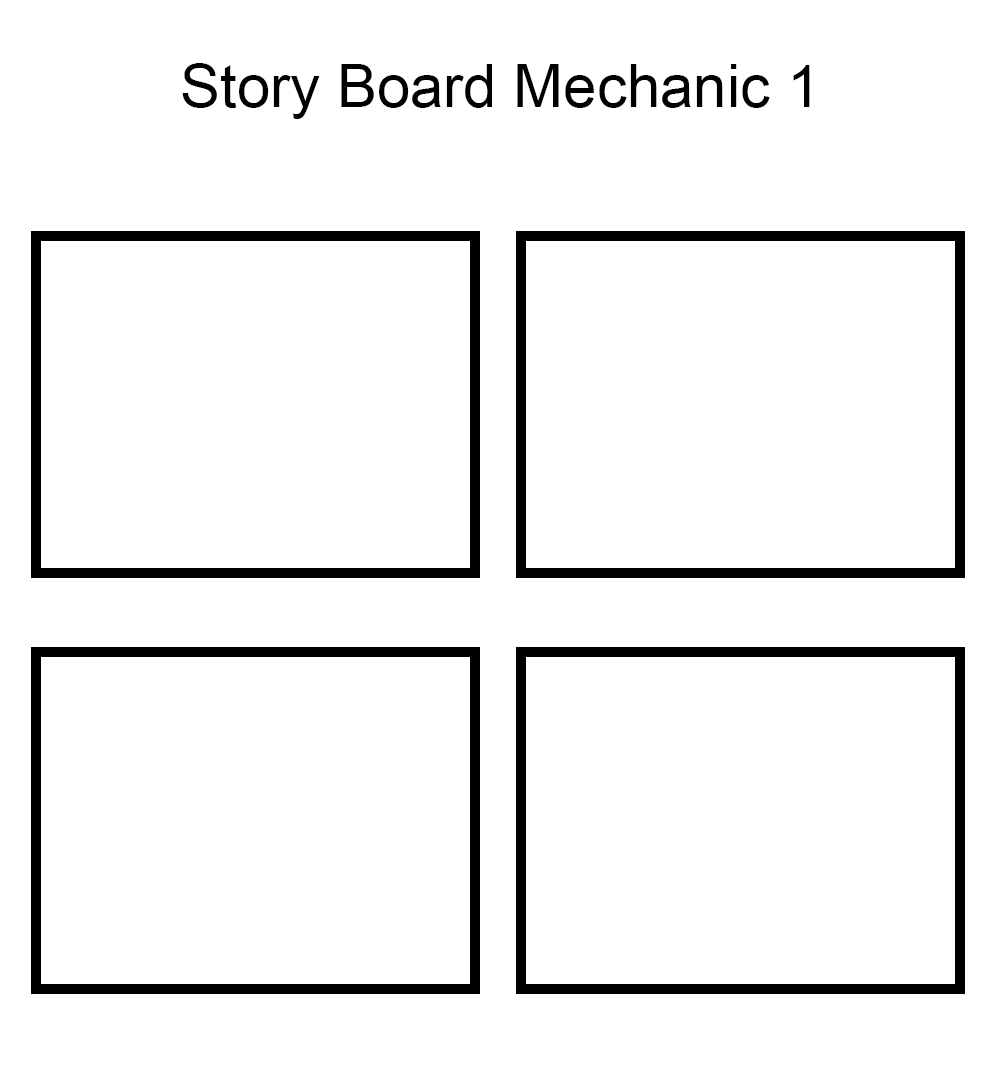
<style>
.page{position:relative;width:1000px;height:1080px;background:#ffffff}
.page>*{position:absolute;margin:0}
.t1{font:60px "ArialMT";color:#000000}
</style>
<div class="page">
<p class="t1" style="left:182px;top:63px;width:628px;height:56px">Story Board Mechanic 1</p>
</div>
